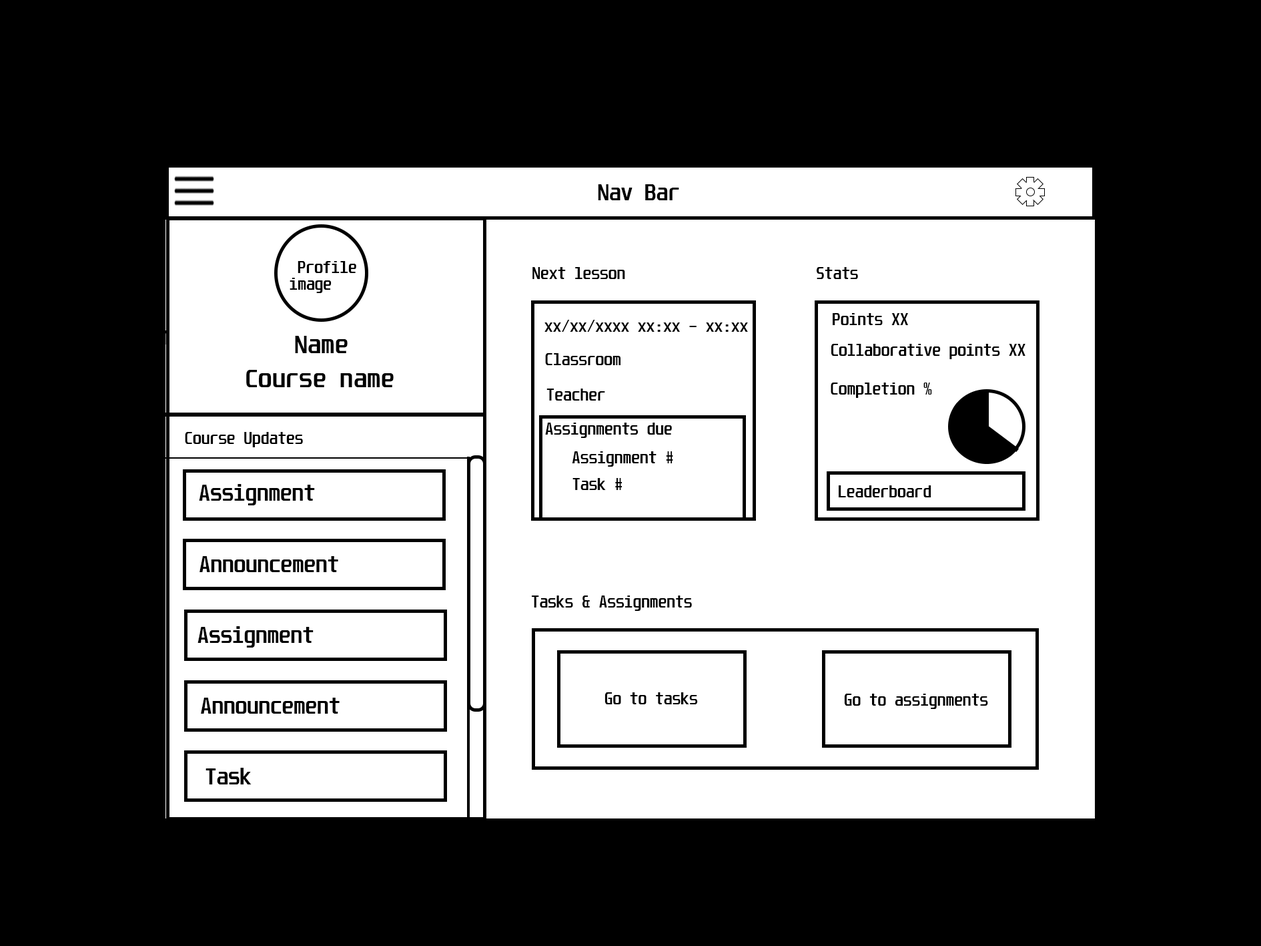
<style>
.page{position:relative;width:1261px;height:946px;background:#000000}
.page>*{position:absolute;margin:0}
.t1{font:19.3px "Unispace-Bold";color:#000000}
.t2{font:13.9px "Unispace-Bold";color:#000000}
.t3{font:22.2px "Unispace-Bold";color:#000000}
.t4{font:19.1px "Unispace-Bold";color:#000000}
</style>
<div class="page">
<p class="t1" style="left:598px;top:184px;width:81px;height:16px">Nav Bar</p>
<p class="t2" style="left:290px;top:261px;width:66px;height:32px">Profile image</p>
<p class="t2" style="left:532px;top:267px;width:93px;height:12px">Next lesson</p>
<p class="t2" style="left:816px;top:267px;width:42px;height:12px">Stats</p>
<p class="t2" style="left:833px;top:313px;width:75px;height:12px">Points XX</p>
<p class="t2" style="left:544px;top:320px;width:204px;height:12px">xx/xx/xxxx xx:xx - xx:xx</p>
<p class="t3" style="left:295px;top:336px;width:53px;height:17px">Name</p>
<p class="t2" style="left:545px;top:353px;width:76px;height:12px">Classroom</p>
<p class="t2" style="left:831px;top:344px;width:195px;height:15px">Collaborative points XX</p>
<p class="t3" style="left:246px;top:370px;width:148px;height:17px">Course name</p>
<p class="t2" style="left:546px;top:388px;width:59px;height:12px">Teacher</p>
<p class="t2" style="left:831px;top:382px;width:101px;height:16px">Completion %</p>
<p class="t2" style="left:545px;top:422px;width:127px;height:16px">Assignments due</p>
<p class="t2" style="left:185px;top:432px;width:118px;height:15px">Course Updates</p>
<p class="t2" style="left:572px;top:451px;width:101px;height:15px">Assignment #</p>
<p class="t4" style="left:199px;top:484px;width:116px;height:21px">Assignment</p>
<p class="t2" style="left:573px;top:478px;width:49px;height:12px">Task #</p>
<p class="t2" style="left:839px;top:485px;width:93px;height:12px">Leaderboard</p>
<p class="t4" style="left:200px;top:556px;width:138px;height:16px">Announcement</p>
<p class="t2" style="left:532px;top:595px;width:160px;height:16px">Tasks &amp; Assignments</p>
<p class="t4" style="left:198px;top:626px;width:116px;height:21px">Assignment</p>
<p class="t4" style="left:201px;top:697px;width:139px;height:16px">Announcement</p>
<p class="t2" style="left:605px;top:692px;width:93px;height:12px">Go to tasks</p>
<p class="t2" style="left:844px;top:693px;width:144px;height:16px">Go to assignments</p>
<p class="t4" style="left:206px;top:767px;width:46px;height:17px">Task</p>
</div>
